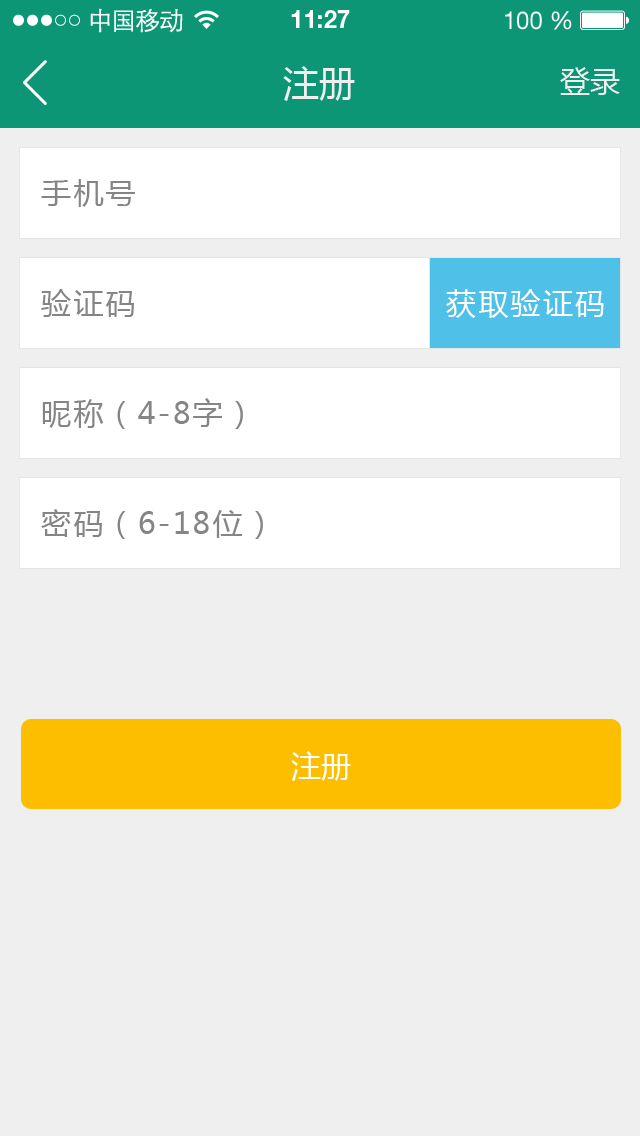
<style>
.page{position:relative;width:640px;height:1136px;background:#efefef}
.page>*{position:absolute;margin:0}
.t1{font:25px "STXihei";letter-spacing:-0.045em;color:#fefefe}
.t2{font:24.6px "HelveticaNeueLTPro-Bd";color:#ffffff}
.t3{font:24.6px "HelveticaNeueLTStd-Roman";color:#ffffff}
.t4{font:36px "MicrosoftYaHei";color:#efefef}
.t5{font:30px "MicrosoftYaHei";color:#efefef}
.t6{font:30px "MicrosoftYaHei";letter-spacing:0.075em;color:#858585}
.t7{font:30px "MicrosoftYaHei";letter-spacing:0.075em;color:#ffffff}
.t8{font:30px "MicrosoftYaHei";color:#ffffff}
</style>
<div class="page">
<p class="t1" style="left:90px;top:8px;width:93px;height:25px">中国移动</p>
<p class="t2" style="left:291px;top:10px;width:59px;height:18px">11:27</p>
<p class="t3" style="left:505px;top:11px;width:67px;height:19px">100 %</p>
<p class="t4" style="left:283px;top:66px;width:72px;height:35px">注册</p>
<p class="t5" style="left:560px;top:67px;width:60px;height:28px">登录</p>
<p class="t6" style="left:41px;top:179px;width:94px;height:28px">手机号</p>
<p class="t6" style="left:41px;top:289px;width:93px;height:28px">验证码</p>
<p class="t7" style="left:446px;top:289px;width:158px;height:29px">获取验证码</p>
<p class="t6" style="left:42px;top:398px;width:201px;height:31px">昵称（4-8字）</p>
<p class="t6" style="left:41px;top:509px;width:222px;height:30px">密码（6-18位）</p>
<p class="t8" style="left:291px;top:751px;width:60px;height:30px">注册</p>
</div>
